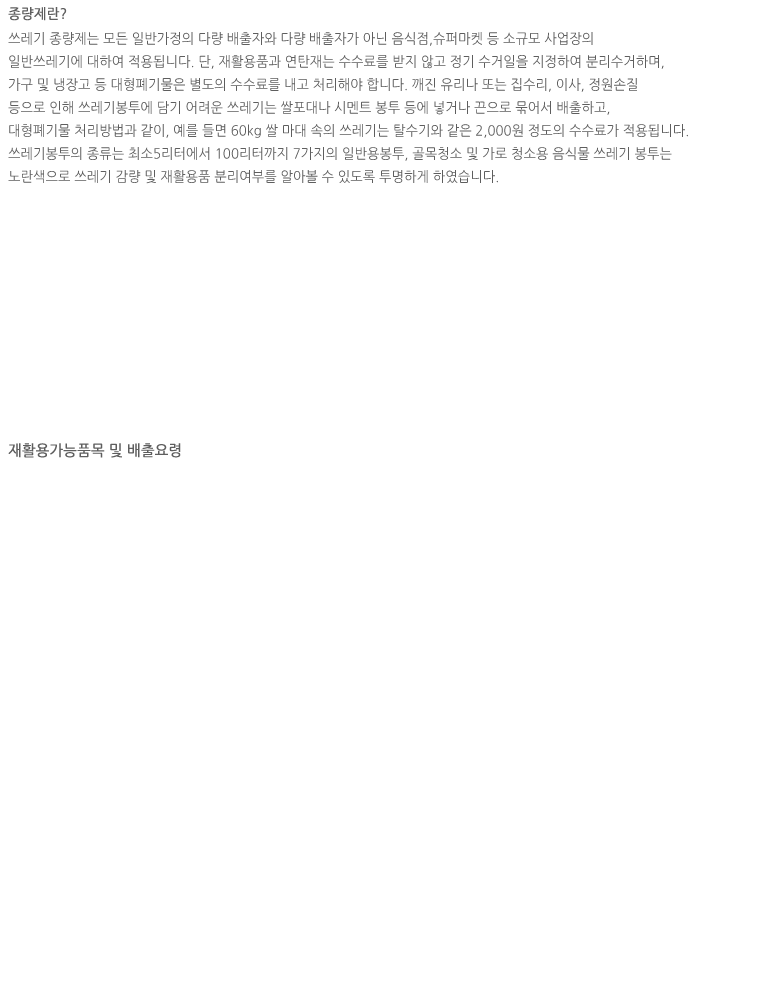
<style>
.page{position:relative;width:782px;height:1000px;background:#ffffff}
.page>*{position:absolute;margin:0}
.t1{font:15px/23px "NanumGothic";color:#5e5e5e;font-weight:bold;scale:0.95 1}
.t2{font:14px/23px "NanumGothic";color:#5e5e5e;font-weight:bold;scale:0.95 1}
.t3{font:14px/23px "NanumGothic";color:#5e5e5e;scale:0.95 1}
</style>
<div class="page">
<p class="t1" style="left:8px;top:7px;width:173px;height:451px"><span class="t2">종량제란?<br><br><br><br><br><br><br><br><br><br><br><br><br><br><br><br><br><br><br></span>재활용가능품목 및 배출요령</p>
<p class="t3" style="left:8px;top:32px;width:680px;height:152px">쓰레기 종량제는 모든 일반가정의 다량 배출자와 다량 배출자가 아닌 음식점,슈퍼마켓 등 소규모 사업장의 <br>일반쓰레기에 대하여 적용됩니다. 단, 재활용품과 연탄재는 수수료를 받지 않고 정기 수거일을 지정하여 분리수거하며,<br>가구 및 냉장고 등 대형폐기물은 별도의 수수료를 내고 처리해야 합니다. 깨진 유리나 또는 집수리, 이사, 정원손질 <br>등으로 인해 쓰레기봉투에 담기 어려운 쓰레기는 쌀포대나 시멘트 봉투 등에 넣거나 끈으로 묶어서 배출하고, <br>대형폐기물 처리방법과 같이, 예를 들면 60kg 쌀 마대 속의 쓰레기는 탈수기와 같은 2,000원 정도의 수수료가 적용됩니다. <br>쓰레기봉투의 종류는 최소5리터에서 100리터까지 7가지의 일반용봉투, 골목청소 및 가로 청소용 음식물 쓰레기 봉투는 <br>노란색으로 쓰레기 감량 및 재활용품 분리여부를 알아볼 수 있도록 투명하게 하였습니다.</p>
</div>
